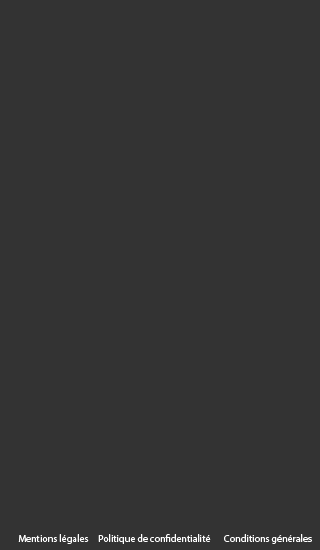
<style>
.page{position:relative;width:320px;height:550px;background:#333333}
.page>*{position:absolute;margin:0}
.t1{font:10px "MyriadPro-Regular";color:#ffffff}
</style>
<div class="page">
<p class="t1" style="left:18px;top:534px;width:71px;height:10px">Mentions légales</p>
<p class="t1" style="left:98px;top:534px;width:113px;height:10px">Politique de confidentialité</p>
<p class="t1" style="left:224px;top:534px;width:88px;height:10px">Conditions générales</p>
</div>
